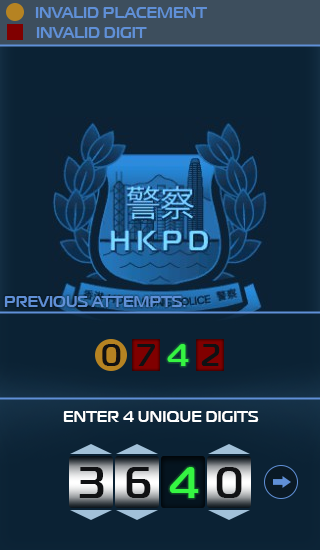
<style>
.page{position:relative;width:320px;height:550px;background:#0b2234}
.page>*{position:absolute;margin:0}
.t1{font:16.1px "MagistralC-Bold";color:#6090d7}
.t2{font:31.5px "MagistralC-Bold";color:#101113}
.t3{font:31.5px "MagistralC-Bold";color:#35f542}
.t4{font:16.1px "MagistralC-Bold";color:#ffffff}
.t5{font:43.8px "MagistralC-Bold";color:#101113}
.t6{font:43.8px "MagistralC-Bold";color:#35f542}
</style>
<div class="page">
<p class="t1" style="left:35px;top:7px;width:172px;height:11px">INVALID PLACEMENT</p>
<p class="t1" style="left:36px;top:27px;width:111px;height:11px">INVALID DIGIT</p>
<p class="t1" style="left:4px;top:296px;width:182px;height:11px">PREVIOUS ATTEMPTS:</p>
<p class="t2" style="left:102px;top:344px;width:19px;height:22px">0</p>
<p class="t2" style="left:137px;top:344px;width:18px;height:22px">7</p>
<p class="t3" style="left:167px;top:344px;width:22px;height:22px">4</p>
<p class="t2" style="left:201px;top:344px;width:19px;height:22px">2</p>
<p class="t4" style="left:63px;top:411px;width:196px;height:11px">ENTER 4 UNIQUE DIGITS</p>
<p class="t5" style="left:79px;top:467px;width:25px;height:31px">3</p>
<p class="t5" style="left:126px;top:467px;width:25px;height:31px">6</p>
<p class="t6" style="left:169px;top:467px;width:30px;height:31px">4</p>
<p class="t5" style="left:216px;top:467px;width:26px;height:31px">0</p>
</div>
